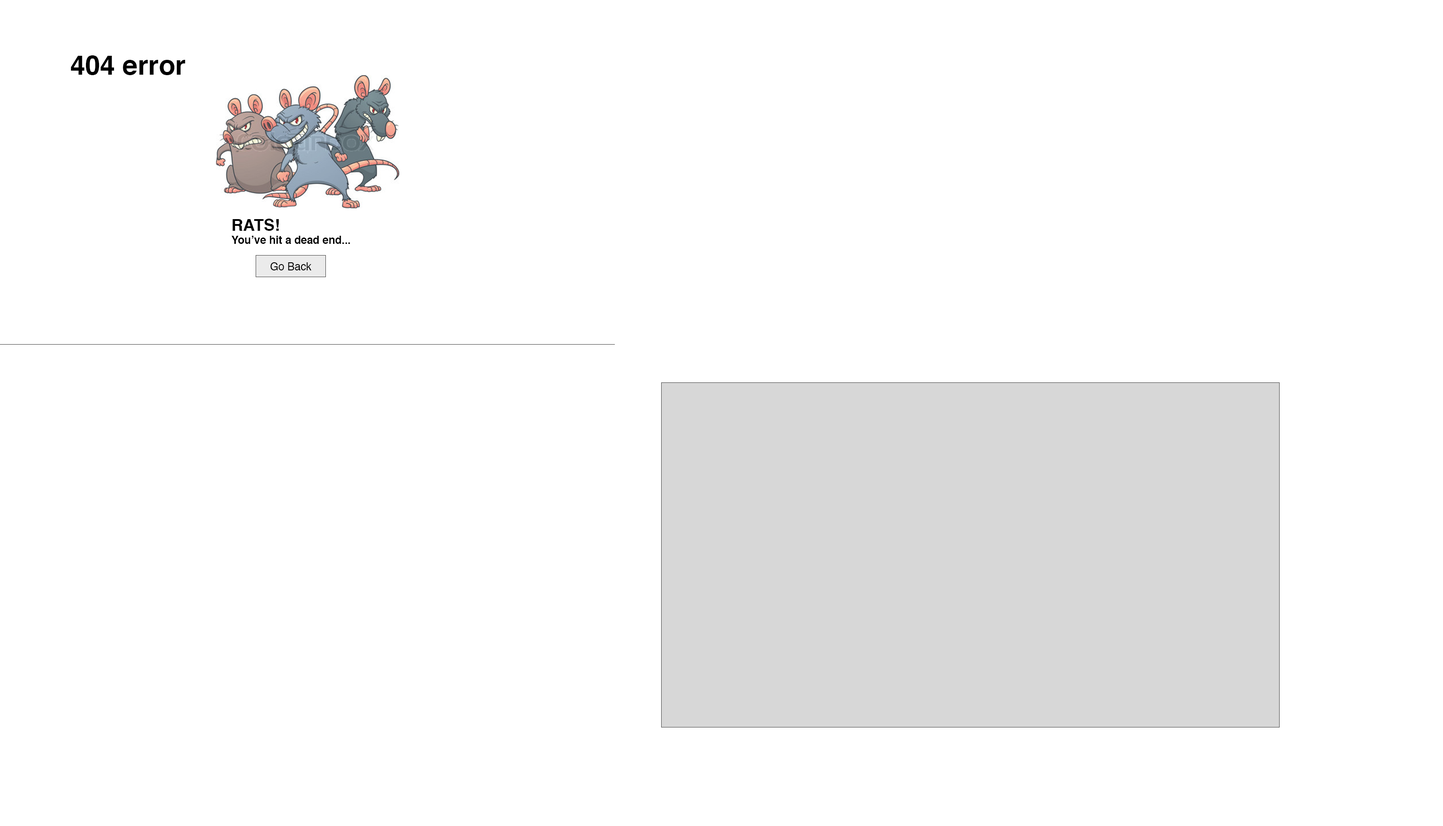
<style>
.page{position:relative;width:1443px;height:826px;background:#ffffff}
.page>*{position:absolute;margin:0}
.t1{font:27px "Helvetica-Bold";color:#000000}
.t2{font:10.8px "Helvetica-Bold";color:#000000}
.t3{font:16.2px "Helvetica-Bold";color:#000000}
.t4{font:10.8px "Helvetica";color:#000000}
</style>
<div class="page">
<p class="t1" style="left:71px;top:55px;width:114px;height:20px">404 error</p>
<p class="t2" style="left:231px;top:219px;width:119px;height:25px"><span class="t3">RATS! <br></span>You’ve hit a dead end...</p>
<p class="t4" style="left:271px;top:262px;width:40px;height:9px">Go Back</p>
</div>
